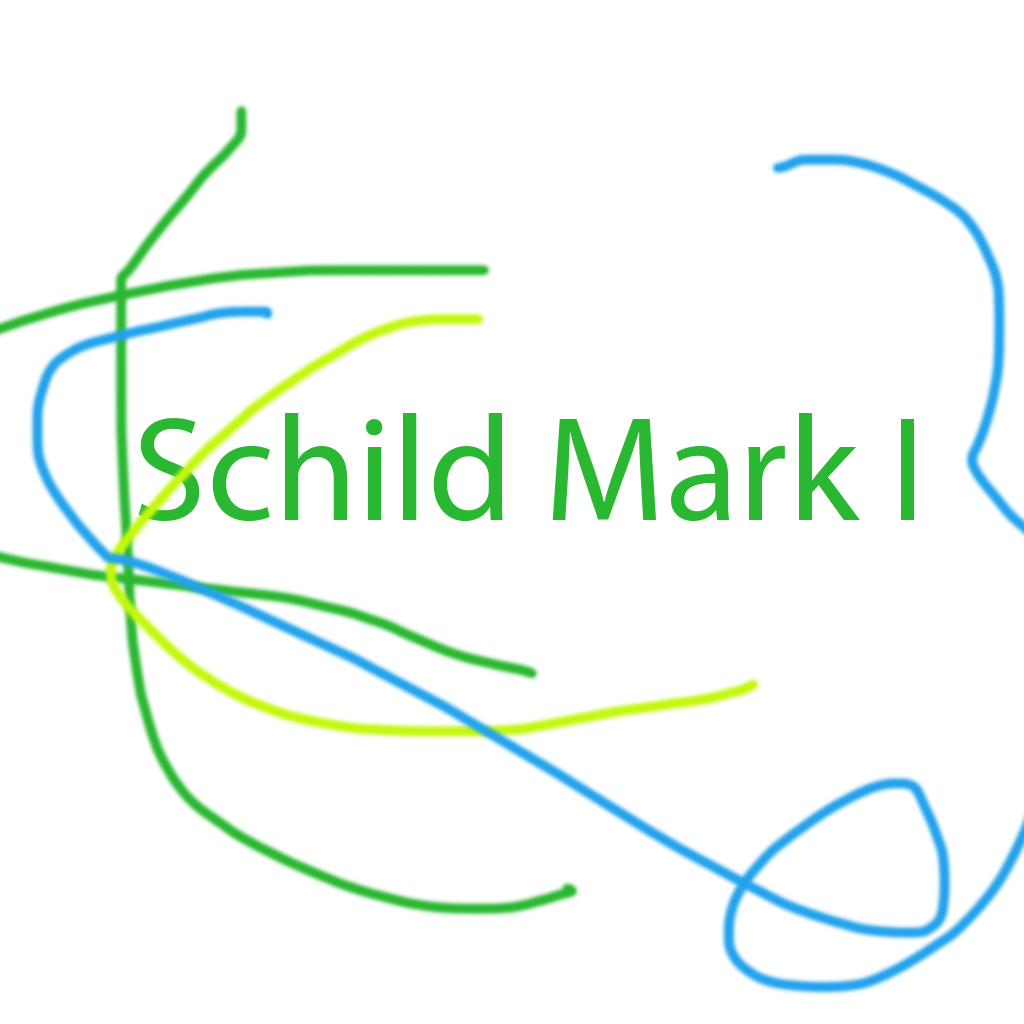
<style>
.page{position:relative;width:1024px;height:1024px;background:#ffffff}
.page>*{position:absolute;margin:0}
.t1{font:150px "MyriadPro-Regular";color:#2ab731}
</style>
<div class="page">
<p class="t1" style="left:138px;top:413px;width:776px;height:109px">Schild Mark I</p>
</div>
